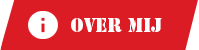
<style>
.page{position:relative;width:199px;height:50px;background:#dc1c25}
.page>*{position:absolute;margin:0}
.t1{font:18px "StencilStd";color:#ffffff}
</style>
<div class="page">
<p class="t1" style="left:71px;top:18px;width:91px;height:14px">Over MIJ</p>
</div>
